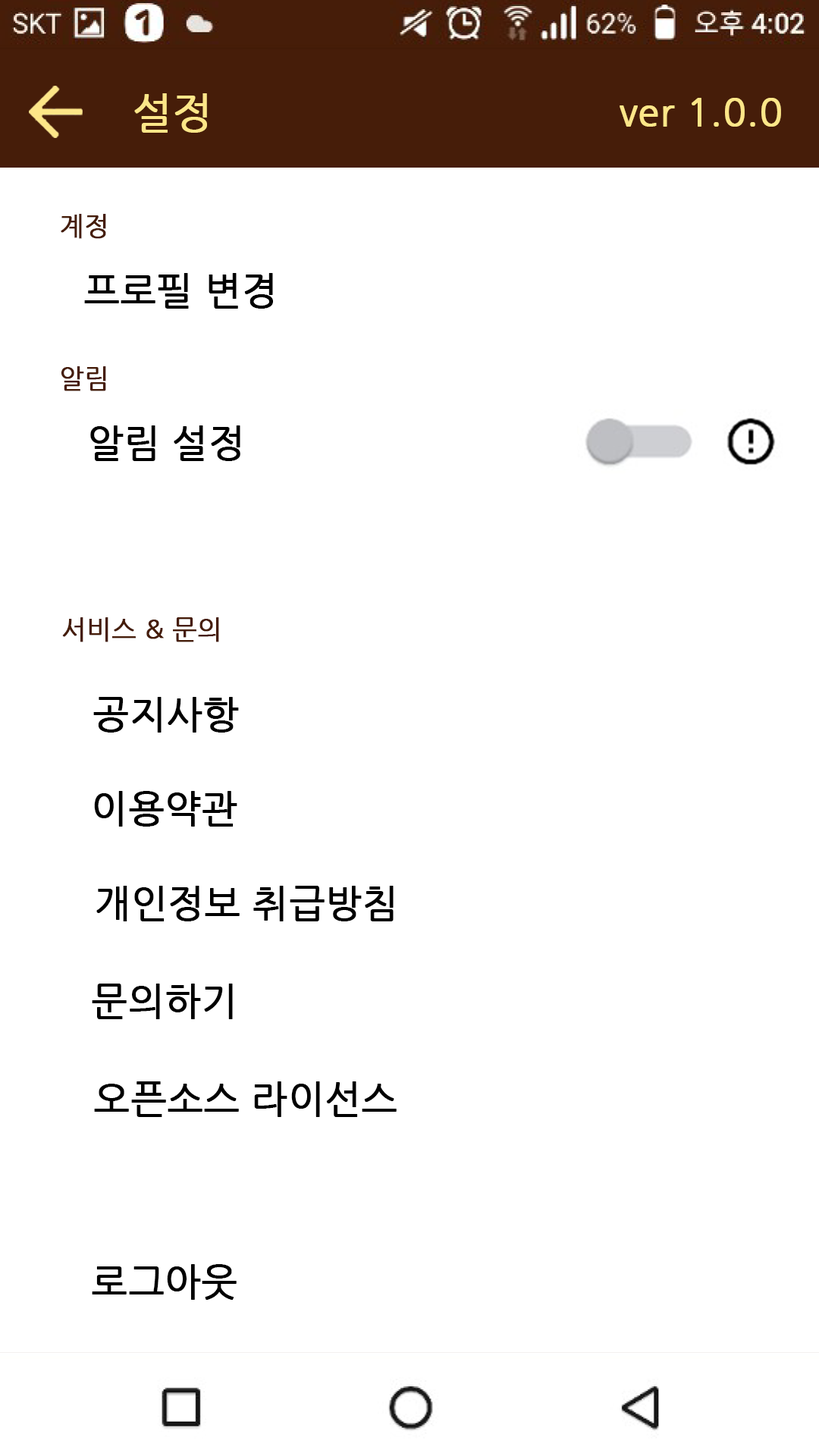
<style>
.page{position:relative;width:819px;height:1456px;background:#ffffff}
.page>*{position:absolute;margin:0}
.t1{font:42.1px "NanumGothic";color:#fde688;font-weight:bold}
.t2{font:37.8px "NanumGothic";color:#fde688;font-weight:bold}
.t3{font:26px "NanumGothic";color:#461d09;font-weight:bold}
.t4{font:37.8px "NanumGothic";color:#000000;font-weight:bold}
</style>
<div class="page">
<p class="t1" style="left:134px;top:93px;width:73px;height:40px">설정</p>
<p class="t2" style="left:620px;top:98px;width:161px;height:29px">ver 1.0.0</p>
<p class="t3" style="left:61px;top:214px;width:45px;height:25px">계정</p>
<p class="t4" style="left:84px;top:273px;width:189px;height:36px">프로필 변경</p>
<p class="t3" style="left:61px;top:366px;width:45px;height:25px">알림</p>
<p class="t4" style="left:90px;top:425px;width:150px;height:36px">알림 설정</p>
<p class="t3" style="left:62px;top:617px;width:157px;height:25px">서비스 &amp; 문의</p>
<p class="t4" style="left:93px;top:697px;width:146px;height:36px">공지사항</p>
<p class="t4" style="left:94px;top:791px;width:143px;height:36px">이용약관</p>
<p class="t4" style="left:96px;top:886px;width:298px;height:35px">개인정보 취급방침</p>
<p class="t4" style="left:92px;top:984px;width:141px;height:35px">문의하기</p>
<p class="t4" style="left:94px;top:1081px;width:303px;height:36px">오픈소스 라이선스</p>
<p class="t4" style="left:92px;top:1264px;width:145px;height:36px">로그아웃</p>
</div>
